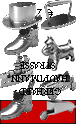
<style>
.page{position:relative;width:76px;height:124px;background:#ffffff}
.page>*{position:absolute;margin:0}
.t1{font:14px "MyriadPro-Regular";color:#000000}
.t2{font:11px "AdobeDevanagari-Regular";color:#000000;scale:0.9 1}
</style>
<div class="page">
<p class="t1" style="left:22px;top:9px;width:31px;height:10px;rotate:180deg">€ 220</p>
<p class="t2" style="left:8px;top:62px;width:60px;height:33px;text-align:center;rotate:180deg">GERHARD-<br>HAUPTMANN-<br>STRASSE</p>
</div>
